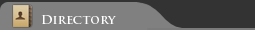
<style>
.page{position:relative;width:255px;height:30px;background:#808080}
.page>*{position:absolute;margin:0}
.t1{font:12px "TrajanPro-Bold";color:#ffffff;scale:1.05 1}
</style>
<div class="page">
<p class="t1" style="left:41px;top:15px;width:75px;height:9px">Directory</p>
</div>
